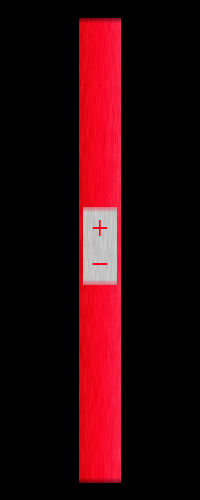
<style>
.page{position:relative;width:200px;height:500px;background:#000000}
.page>*{position:absolute;margin:0}
.t1{font:30px "Roboto-Light";color:#ff0025}
</style>
<div class="page">
<p class="t1" style="left:92px;top:220px;width:16px;height:16px">+</p>
</div>
